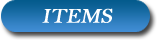
<style>
.page{position:relative;width:157px;height:40px}
.page>*{position:absolute;margin:0}
.t1{font:36px "BellMT";color:#ffffff;font-weight:bold;font-style:italic}
</style>
<div class="page">
<p class="t1" style="left:42px;top:8px;width:71px;height:15px">ITEMS</p>
</div>
